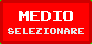
<style>
.page{position:relative;width:92px;height:44px;background:#ff0000}
.page>*{position:absolute;margin:0}
.t1{font:20px "ArcadeClassic";color:#ffffff}
.t2{font:12.4px "ArcadeClassic";color:#e6e6e6;scale:0.97 1}
</style>
<div class="page">
<p class="t1" style="left:19px;top:11px;width:54px;height:10px">medio</p>
<p class="t2" style="left:8px;top:28px;width:76px;height:6px">selezionare</p>
</div>
